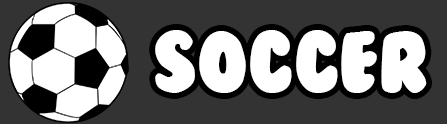
<style>
.page{position:relative;width:447px;height:124px;background:#333333}
.page>*{position:absolute;margin:0}
.t1{font:80px "BubbleGum";color:#ffffff}
</style>
<div class="page">
<p class="t1" style="left:155px;top:30px;width:272px;height:63px">Soccer</p>
</div>
